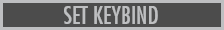
<style>
.page{position:relative;width:224px;height:30px;background:#4c4c4c}
.page>*{position:absolute;margin:0}
.t1{font:24px "FuturaCondensed";color:#bebfc1}
</style>
<div class="page">
<p class="t1" style="left:64px;top:6px;width:94px;height:18px">SET KEYBIND</p>
</div>
